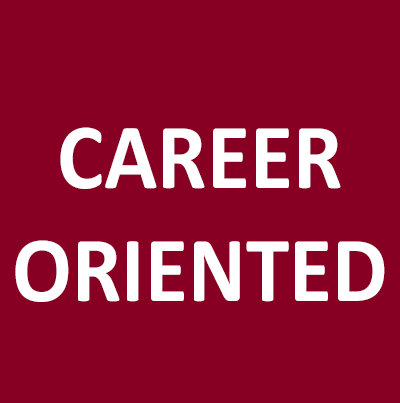
<style>
.page{position:relative;width:400px;height:403px;background:#870023}
.page>*{position:absolute;margin:0}
.t1{font:94.2px "Calibri-Bold";color:#ffffff;scale:0.94 1}
</style>
<div class="page">
<p class="t1" style="left:15px;top:127px;width:370px;height:175px;text-align:center">CAREER<br>ORIENTED</p>
</div>
